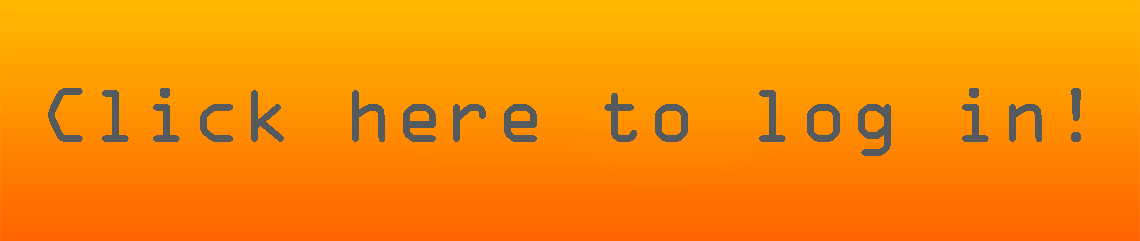
<style>
.page{position:relative;width:1140px;height:241px}
.page>*{position:absolute;margin:0}
.t1{font:70px "OCRAStd";color:#555a5e}
</style>
<div class="page">
<p class="t1" style="left:48px;top:88px;width:1033px;height:68px">Click here to log in!</p>
</div>
